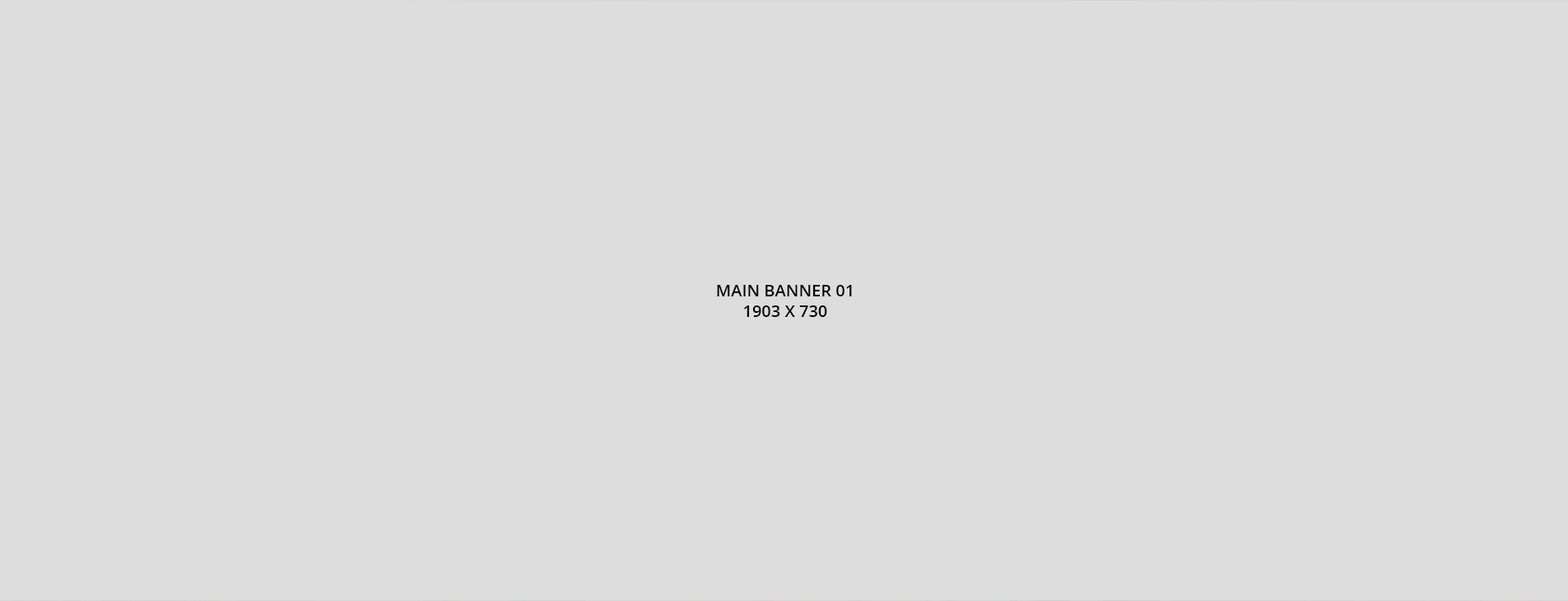
<style>
.page{position:relative;width:1568px;height:601px;background:#dddddd}
.page>*{position:absolute;margin:0}
.t1{font:16.5px/20.6px "OpenSans-SemiBold";color:#000000;text-transform:uppercase}
</style>
<div class="page">
<p class="t1" style="left:717px;top:285px;width:135px;height:32px;text-align:center">main banner 01<br>1903 x 730</p>
</div>
